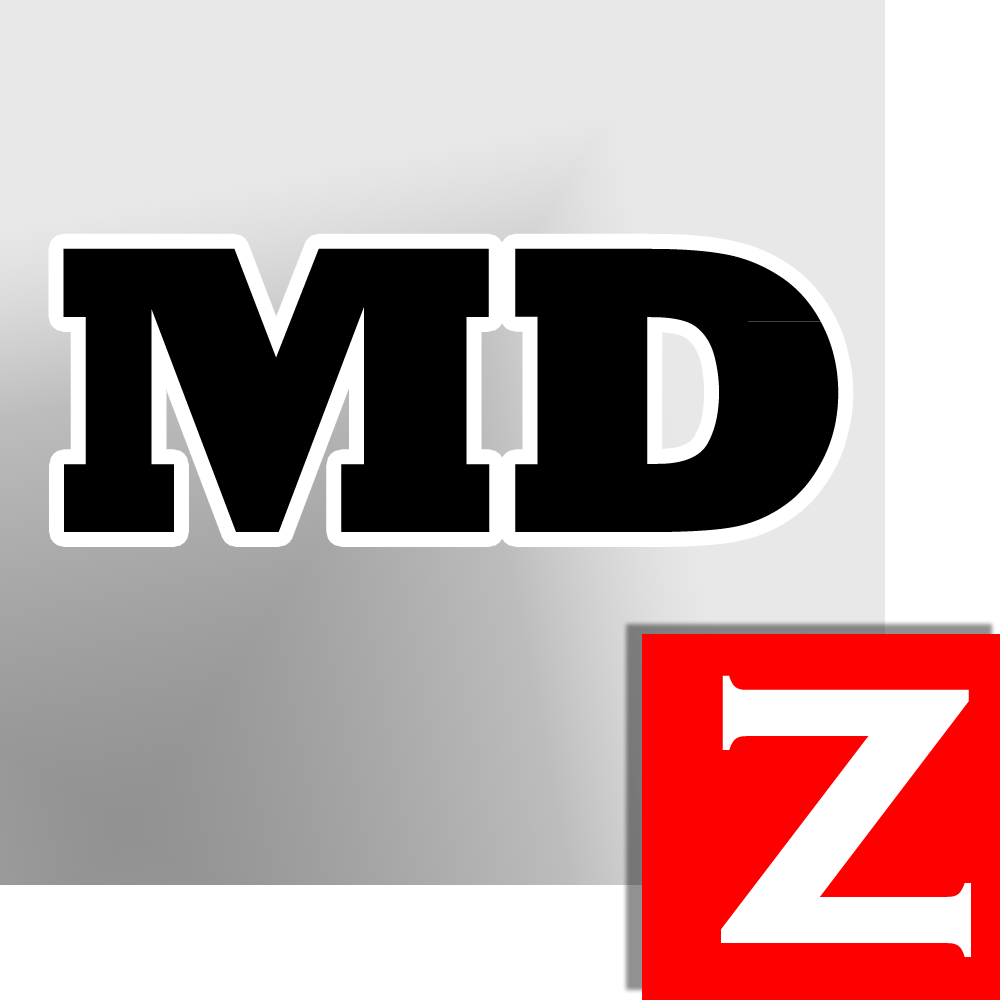
<style>
.page{position:relative;width:1000px;height:1000px;background:#ffffff}
.page>*{position:absolute;margin:0}
.t1{font:416.7px "Rockwell-ExtraBold";color:#000000}
.t2{font:463.2px "CopperplateGothic-Bold";color:#ffffff}
</style>
<div class="page">
<p class="t1" style="left:63px;top:248px;width:427px;height:284px">M</p>
<p class="t1" style="left:515px;top:248px;width:324px;height:284px">D</p>
<p class="t2" style="left:721px;top:675px;width:250px;height:282px">z</p>
</div>
